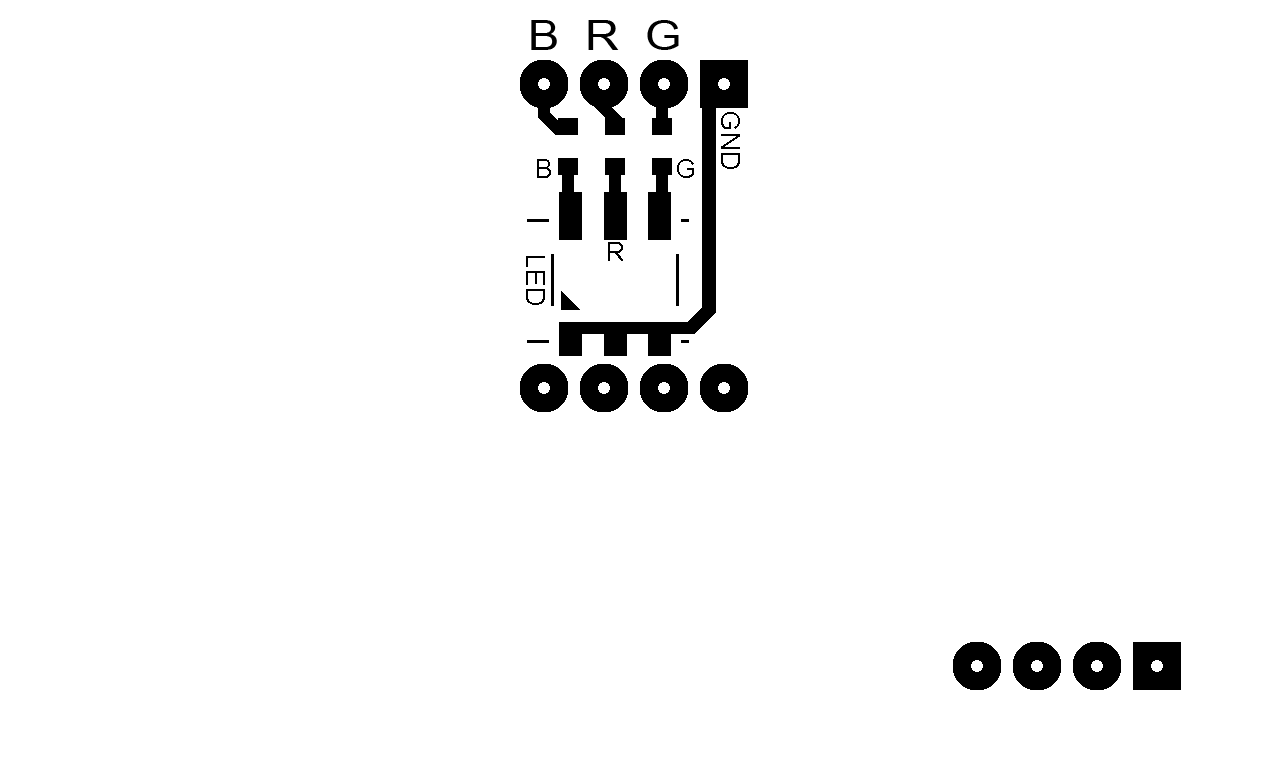
<style>
.page{position:relative;width:1280px;height:768px;background:#ffffff}
.page>*{position:absolute;margin:0}
.t1{font:40.7px "ArialMT";color:#000000;scale:1.15 1}
.t2{font:26.4px "ArialMT";color:#000000}
</style>
<div class="page">
<p class="t1" style="left:531px;top:20px;width:148px;height:30px">B  R  G</p>
<p class="t2" style="left:721px;top:112px;width:19px;height:57px;rotate:90deg">GND</p>
<p class="t2" style="left:537px;top:159px;width:14px;height:19px">B</p>
<p class="t2" style="left:677px;top:159px;width:17px;height:19px">G</p>
<p class="t2" style="left:608px;top:242px;width:15px;height:19px">R</p>
<p class="t2" style="left:526px;top:256px;width:19px;height:49px;rotate:90deg">LED</p>
</div>
